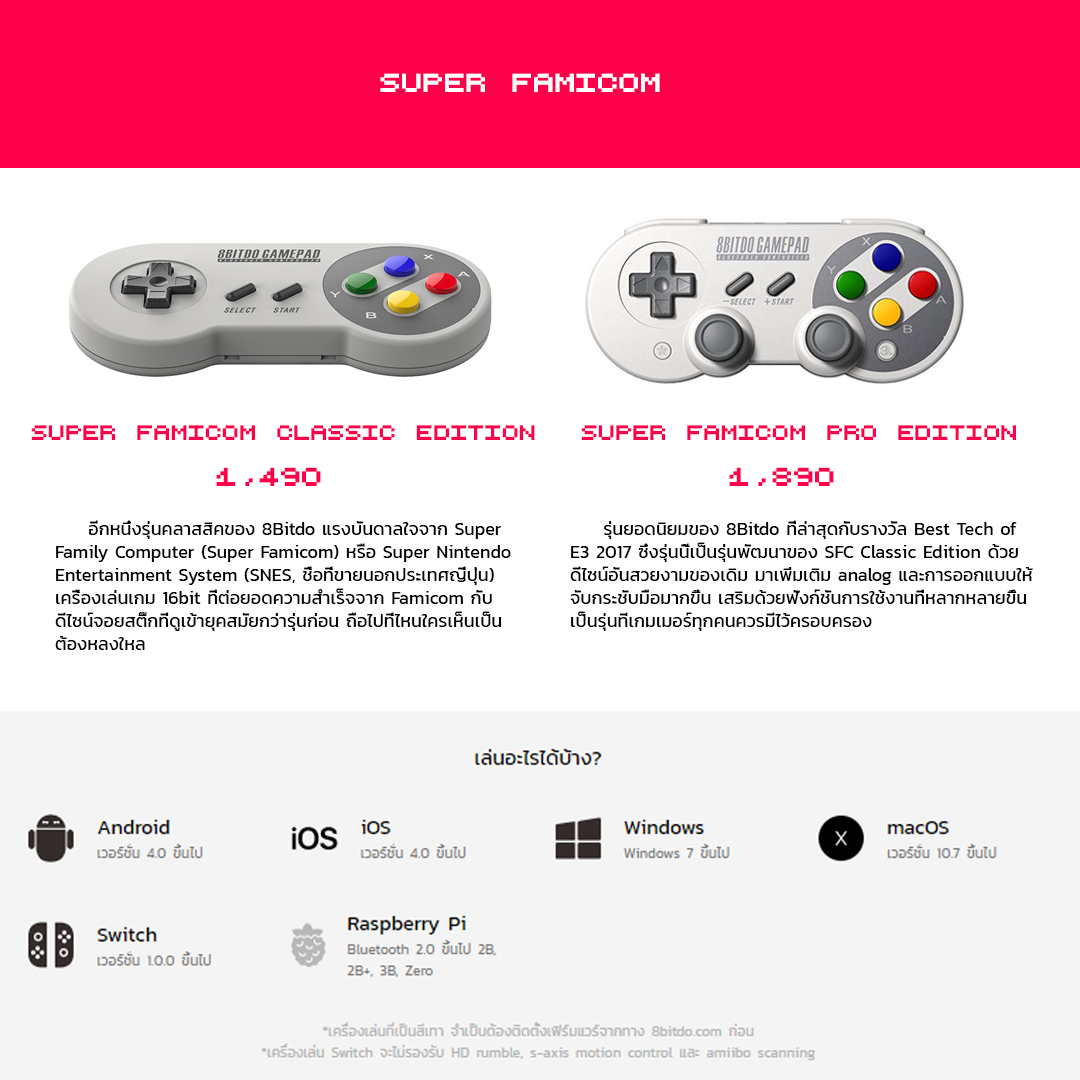
<style>
.page{position:relative;width:1080px;height:1080px;background:#ffffff}
.page>*{position:absolute;margin:0}
.t1{font:30px "LilliputSteps-Regular";color:#ffffff}
.t2{font:24px "LilliputSteps-Regular";color:#ff004a}
.t3{font:30px "LilliputSteps-Regular";color:#ff004a}
.t4{font:18px/23px "Kanit-Regular";color:#000000}
</style>
<div class="page">
<p class="t1" style="left:380px;top:73px;width:280px;height:19px">SUPER FAMICOM</p>
<p class="t2" style="left:31px;top:425px;width:504px;height:15px">SUPER FAMICOM CLASSIC EDITION</p>
<p class="t2" style="left:581px;top:425px;width:435px;height:15px">SUPER FAMICOM PRO EDITION</p>
<p class="t3" style="left:216px;top:467px;width:105px;height:19px">1,490</p>
<p class="t3" style="left:729px;top:467px;width:105px;height:19px">1,890</p>
<p class="t4" style="left:55px;top:520px;width:456px;height:130px;text-align:right">อีกหนึ่งรุ่นคลาสสิคของ 8Bitdo แรงบันดาลใจจาก Super<br>Family Computer (Super Famicom) หรือ Super Nintendo<br>Entertainment System (SNES, ชื่อที่ขายนอกประเทศญี่ปุ่น)<br>เครื่องเล่นเกม 16bit ที่ต่อยอดความสำเร็จจาก Famicom กับ<br>ดีไซน์จอยสติ๊กที่ดูเข้ายุคสมัยกว่ารุ่นก่อน ถือไปที่ไหนใครเห็นเป็น<br>ต้องหลงใหล</p>
<p class="t4" style="left:570px;top:520px;width:463px;height:111px;text-align:right">รุ่นยอดนิยมของ 8Bitdo ที่ล่าสุดกับรางวัล Best Tech of<br>E3 2017 ซึ่งรุ่นนี้เป็นรุ่นพัฒนาของ SFC Classic Edition ด้วย<br>ดีไซน์อันสวยงามของเดิม มาเพิ่มเติม analog และการออกแบบให้<br>จับกระชับมือมากขึ้น เสริมด้วยฟังก์ชันการใช้งานที่หลากหลายขึ้น<br>เป็นรุ่นที่เกมเมอร์ทุกคนควรมีไว้ครอบครอง</p>
</div>
